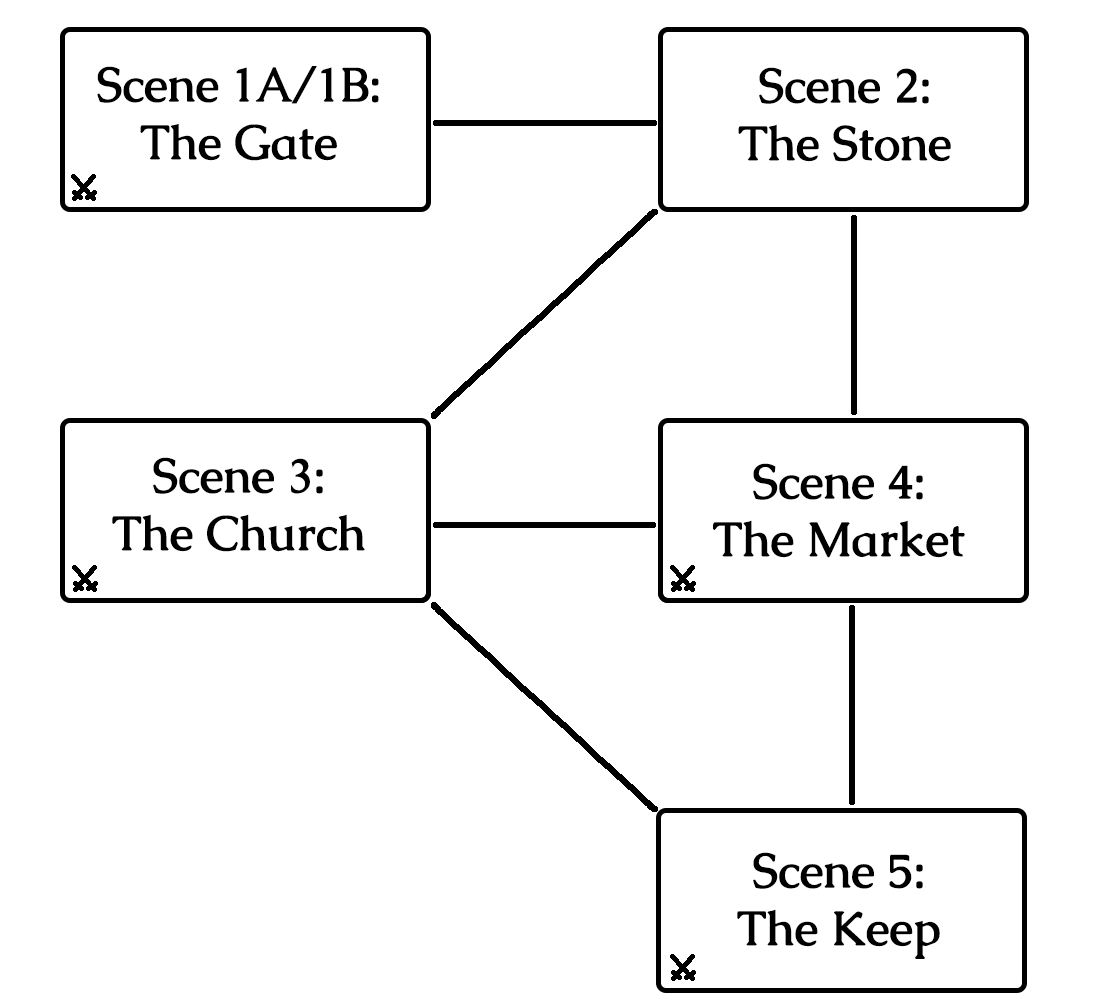
<style>
.page{position:relative;width:1100px;height:1000px;background:#ffffff}
.page>*{position:absolute;margin:0}
.t1{font:48px "Caudex-Bold";color:#000000}
</style>
<div class="page">
<p class="t1" style="left:97px;top:66px;width:282px;height:95px;text-align:center">Scene 1A/1B:<br>The Gate</p>
<p class="t1" style="left:738px;top:67px;width:213px;height:95px;text-align:center">Scene 2:<br>The Stone</p>
<p class="t1" style="left:112px;top:457px;width:253px;height:95px;text-align:center">Scene 3:<br>The Church</p>
<p class="t1" style="left:713px;top:463px;width:252px;height:95px;text-align:center">Scene 4:<br>The Market</p>
<p class="t1" style="left:737px;top:852px;width:203px;height:107px;text-align:center">Scene 5:<br>The Keep</p>
</div>
